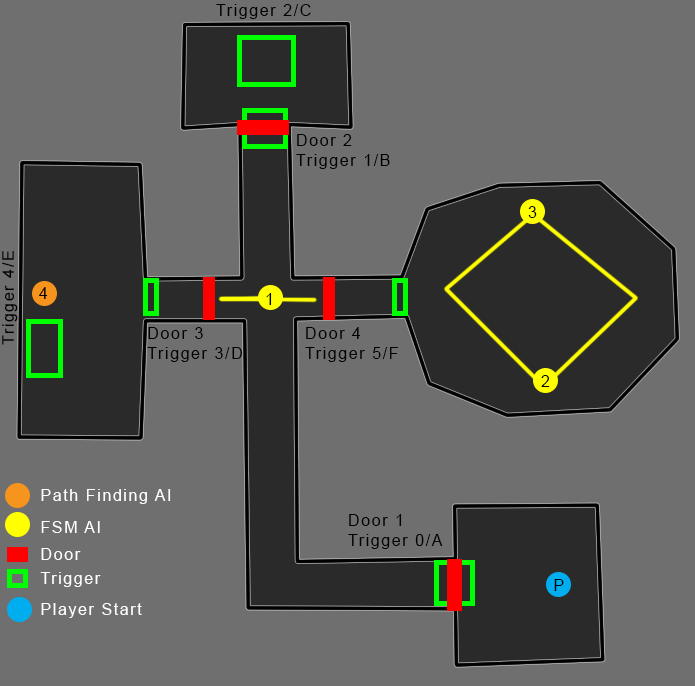
<style>
.page{position:relative;width:695px;height:686px;background:#6f6f6f}
.page>*{position:absolute;margin:0}
.t1{font:12px "ArialMT";letter-spacing:0.1em;color:#000000}
.t2{font:12.1px "ArialMT";letter-spacing:0.1em;color:#000000}
.t3{font:16px "ArialMT";letter-spacing:0.1em;color:#ffffff}
</style>
<div class="page">
<p class="t1" style="left:216px;top:4px;width:95px;height:15px">Trigger 2/C</p>
<p class="t1" style="left:296px;top:134px;width:94px;height:35px">Door 2<br>Trigger 1/B</p>
<p class="t1" style="left:528px;top:206px;width:9px;height:12px">3</p>
<p class="t2" style="left:2px;top:251px;width:16px;height:94px;rotate:-90deg">Trigger 4/E</p>
<p class="t1" style="left:39px;top:287px;width:9px;height:12px">4</p>
<p class="t1" style="left:266px;top:293px;width:6px;height:12px">1</p>
<p class="t1" style="left:147px;top:327px;width:95px;height:35px">Door 3<br>Trigger 3/D</p>
<p class="t1" style="left:305px;top:327px;width:93px;height:35px">Door 4<br>Trigger 5/F</p>
<p class="t1" style="left:541px;top:375px;width:9px;height:12px">2</p>
<p class="t3" style="left:41px;top:489px;width:130px;height:15px">Path Finding AI</p>
<p class="t3" style="left:41px;top:521px;width:59px;height:12px">FSM AI</p>
<p class="t1" style="left:348px;top:514px;width:95px;height:35px">Door 1<br>Trigger 0/A</p>
<p class="t3" style="left:41px;top:548px;width:40px;height:12px">Door</p>
<p class="t3" style="left:40px;top:572px;width:61px;height:15px">Trigger</p>
<p class="t1" style="left:554px;top:579px;width:10px;height:12px">P</p>
<p class="t3" style="left:41px;top:603px;width:101px;height:15px">Player Start</p>
</div>
